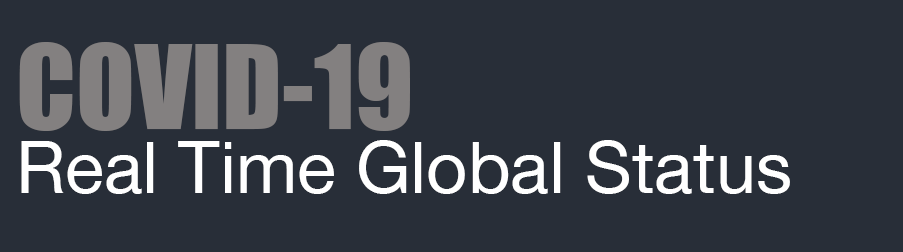
<style>
.page{position:relative;width:903px;height:252px;background:#282e38}
.page>*{position:absolute;margin:0}
.t1{font:108px "Impact";color:#838080}
.t2{font:72px "HelveticaNeue";color:#ffffff}
</style>
<div class="page">
<p class="t1" style="left:19px;top:42px;width:391px;height:89px">COVID-19</p>
<p class="t2" style="left:21px;top:140px;width:769px;height:54px">Real Time Global Status</p>
</div>
